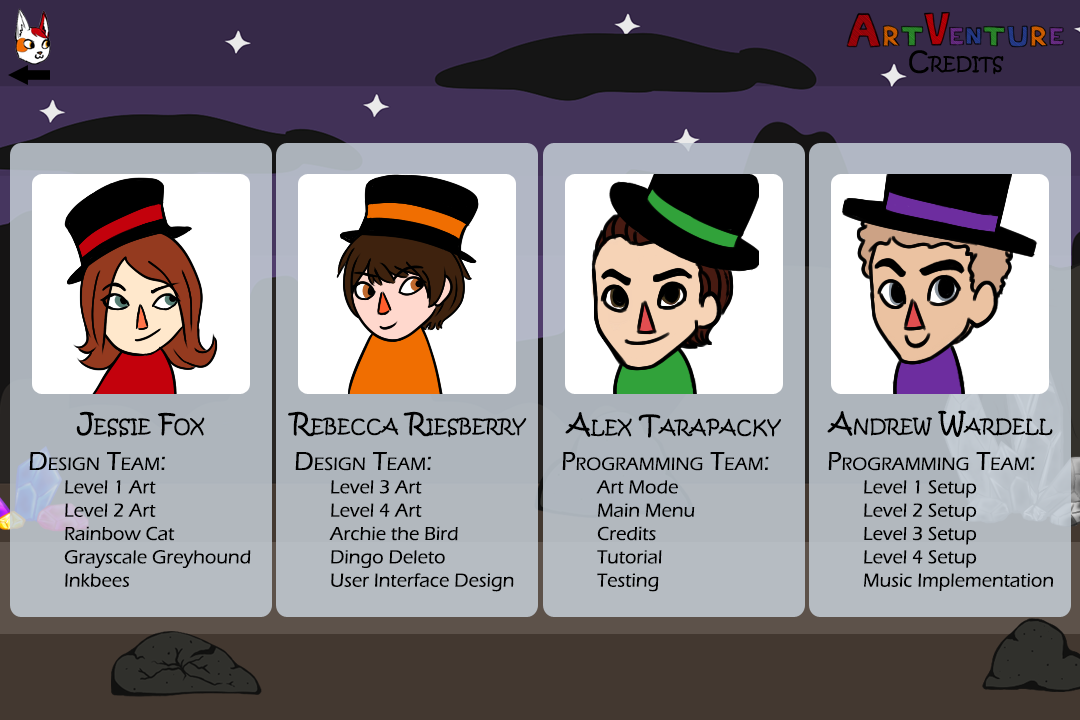
<style>
.page{position:relative;width:1080px;height:720px}
.page>*{position:absolute;margin:0}
.t1{font:26.7px "KristenITC-Regular";color:#000000;font-variant:small-caps}
.t2{font:19.4px "ErasITC-Medium";color:#000000}
.t3{font:26.7px "ErasITC-Medium";color:#000000;font-variant:small-caps}
</style>
<div class="page">
<p class="t1" style="left:76px;top:411px;width:129px;height:27px">Jessie Fox</p>
<p class="t1" style="left:288px;top:411px;width:239px;height:27px">Rebecca Riesberry</p>
<p class="t1" style="left:565px;top:412px;width:216px;height:26px">Alex Tarapacky</p>
<p class="t1" style="left:827px;top:410px;width:226px;height:27px">Andrew Wardell</p>
<p class="t2" style="left:29px;top:452px;width:222px;height:135px"><span class="t3">Design Team:<br></span> Level 1 Art<br> Level 2 Art<br> Rainbow Cat<br> Grayscale Greyhound<br> Inkbees</p>
<p class="t2" style="left:295px;top:452px;width:219px;height:140px"><span class="t3">Design Team:<br></span> Level 3 Art<br> Level 4 Art<br> Archie the Bird<br> Dingo Deleto<br> User Interface Design</p>
<p class="t2" style="left:562px;top:452px;width:207px;height:140px"><span class="t3">Programming Team:<br></span> Art Mode<br> Main Menu<br> Credits<br> Tutorial<br> Testing</p>
<p class="t2" style="left:828px;top:452px;width:225px;height:139px"><span class="t3">Programming Team:<br></span> Level 1 Setup<br> Level 2 Setup<br> Level 3 Setup<br> Level 4 Setup<br> Music Implementation</p>
</div>
